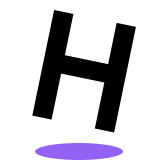
<style>
.page{position:relative;width:164px;height:164px;background:#ffffff}
.page>*{position:absolute;margin:0}
.t1{font:152px "Akkurat-Bold";color:#000000;text-transform:uppercase}
</style>
<div class="page">
<p class="t1" style="left:32px;top:10px;width:104px;height:123px;rotate:12deg">H</p>
</div>
